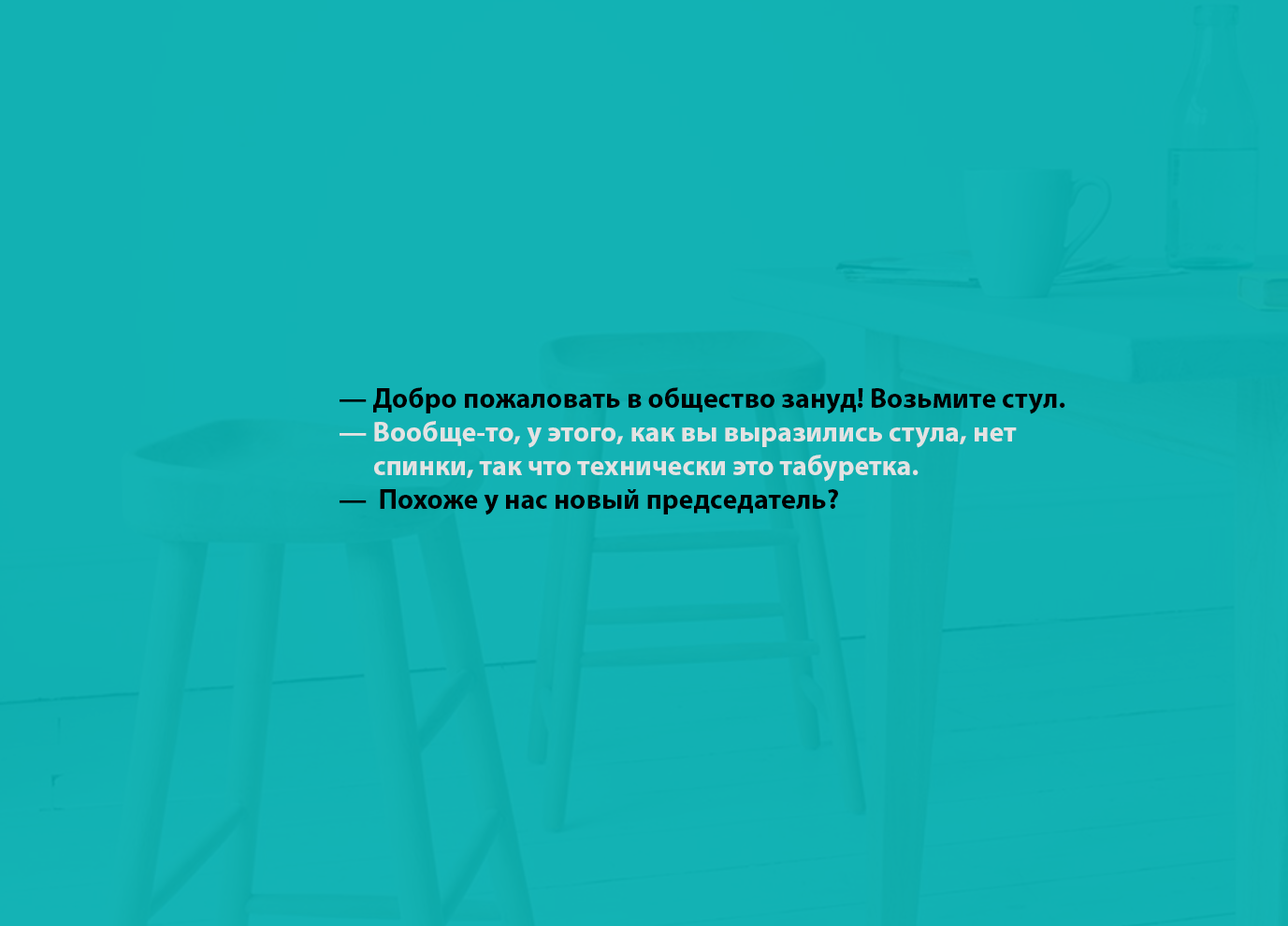
<style>
.page{position:relative;width:1288px;height:926px}
.page>*{position:absolute;margin:0}
.t1{font:28.1px "MyriadPro-Bold";color:#e3e3e3}
.t2{font:28.1px "MyriadPro-Bold";color:#000000}
</style>
<div class="page">
<p class="t1" style="left:339px;top:387px;width:726px;height:128px;text-align:right"><span class="t2">— Добро пожаловать в общество зануд! Возьмите стул.<br></span>— Вообще-то, у этого, как вы выразились стула, нет       <br>      спинки, так что технически это табуретка.<br><span class="t2">—  Похоже у нас новый председатель?</span></p>
</div>
